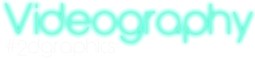
<style>
.page{position:relative;width:255px;height:59px;background:#ffffff}
.page>*{position:absolute;margin:0}
.t1{font:41.3px "Quinfo";letter-spacing:0.025em;color:#8af8d8}
.t2{font:20.6px "Quinfo";letter-spacing:0.025em;color:#f8f8f8}
</style>
<div class="page">
<p class="t1" style="left:4px;top:3px;width:249px;height:41px">Videography</p>
<p class="t2" style="left:5px;top:37px;width:110px;height:21px">#2dgraphics</p>
</div>
